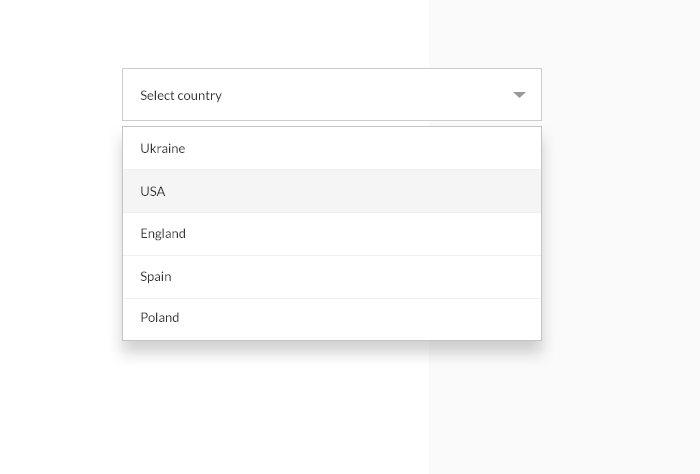
<style>
.page{position:relative;width:700px;height:474px;background:#ffffff}
.page>*{position:absolute;margin:0}
.t1{font:13px "Lato-Regular";color:#333333}
</style>
<div class="page">
<p class="t1" style="left:140px;top:90px;width:82px;height:13px">Select country</p>
<p class="t1" style="left:141px;top:143px;width:44px;height:10px">Ukraine</p>
<p class="t1" style="left:141px;top:186px;width:25px;height:10px">USA</p>
<p class="t1" style="left:141px;top:228px;width:44px;height:13px">England</p>
<p class="t1" style="left:140px;top:271px;width:31px;height:13px">Spain</p>
<p class="t1" style="left:141px;top:312px;width:38px;height:10px">Poland</p>
</div>
